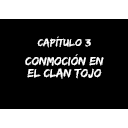
<style>
.page{position:relative;width:128px;height:128px;background:#000000}
.page>*{position:absolute;margin:0}
.t1{font:10.7px "EdoSZ";color:#ffffff;scale:1.05 1}
.t2{font:12.3px/11.8px "EdoSZ";color:#ffffff}
</style>
<div class="page">
<p class="t1" style="left:37px;top:36px;width:54px;height:12px">Capítulo 3</p>
<p class="t2" style="left:25px;top:54px;width:79px;height:25px;text-align:center">Conmoción en<br>el Clan Tojo</p>
</div>
